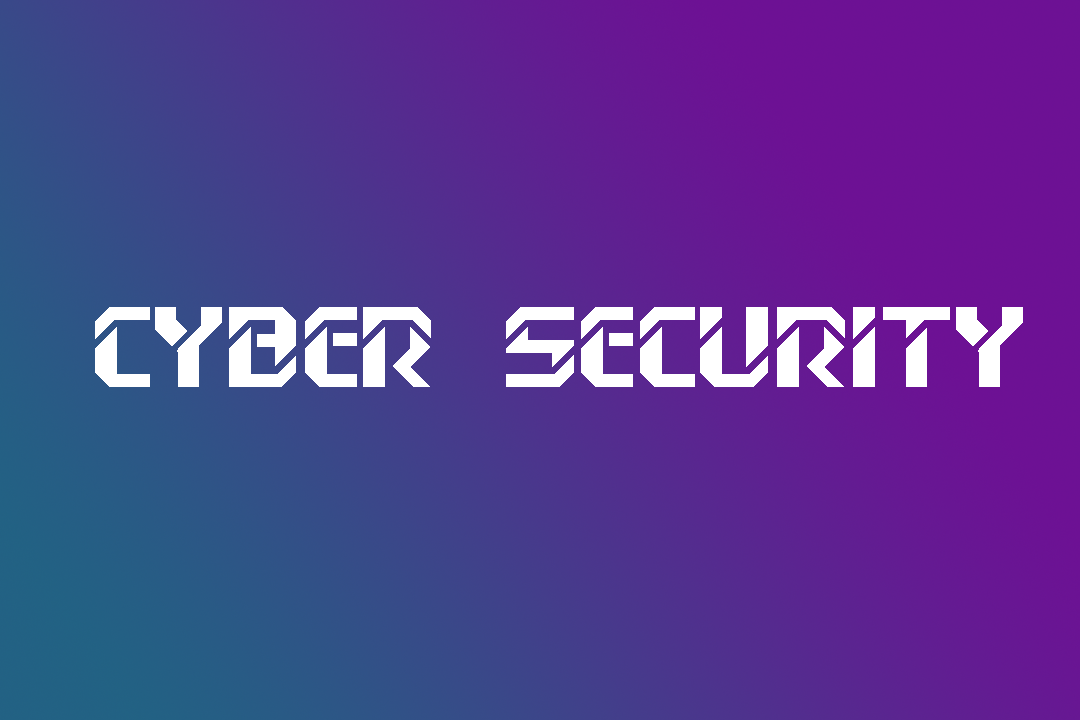
<style>
.page{position:relative;width:1080px;height:720px}
.page>*{position:absolute;margin:0}
.t1{font:120px "DexterC";color:#ffffff}
</style>
<div class="page">
<p class="t1" style="left:95px;top:307px;width:928px;height:80px">Cyber Security</p>
</div>
